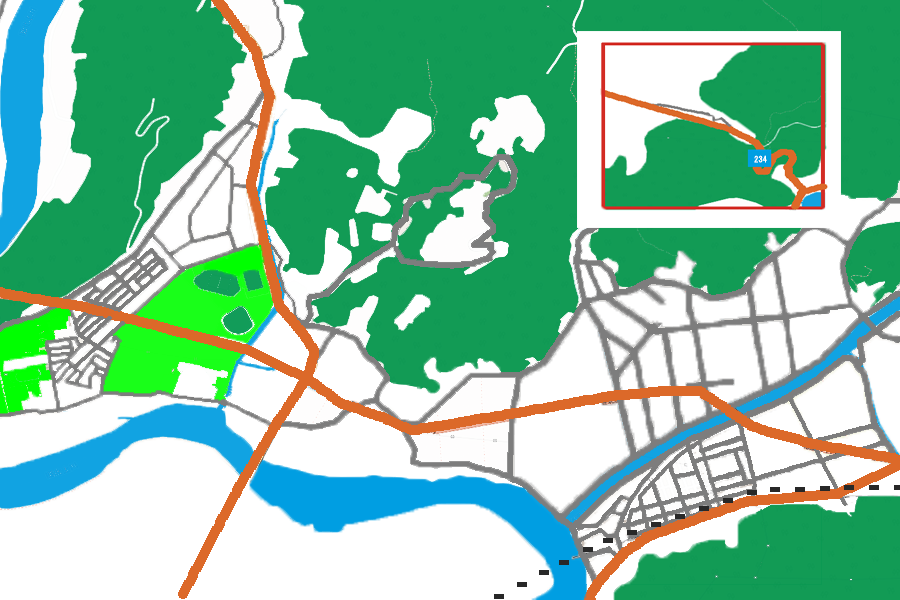
<style>
.page{position:relative;width:900px;height:600px;background:#ffffff}
.page>*{position:absolute;margin:0}
.t1{font:8px "HGSGothicE";color:#ffffff}
</style>
<div class="page">
<p class="t1" style="left:754px;top:155px;width:13px;height:8px">234</p>
</div>
